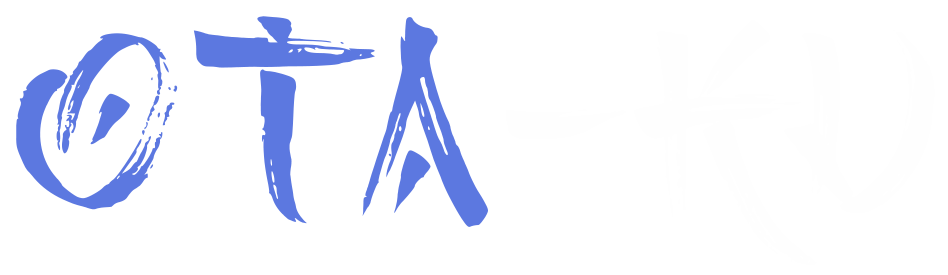
<style>
.page{position:relative;width:948px;height:275px;background:#ffffff}
.page>*{position:absolute;margin:0}
.t1{font:346.3px "KashimaRUSbyCop";color:#5c78e0}
.t2{font:346.3px "KashimaRUSbyCop";color:#fefefe}
</style>
<div class="page">
<p class="t1" style="left:16px;top:16px;width:919px;height:250px">OTA<span class="t2">-ku</span></p>
</div>
